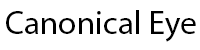
<style>
.page{position:relative;width:200px;height:50px;background:#ffffff}
.page>*{position:absolute;margin:0}
.t1{font:33.3px "MyriadPro-Regular";color:#000000}
</style>
<div class="page">
<p class="t1" style="left:6px;top:10px;width:190px;height:32px">Canonical Eye</p>
</div>
